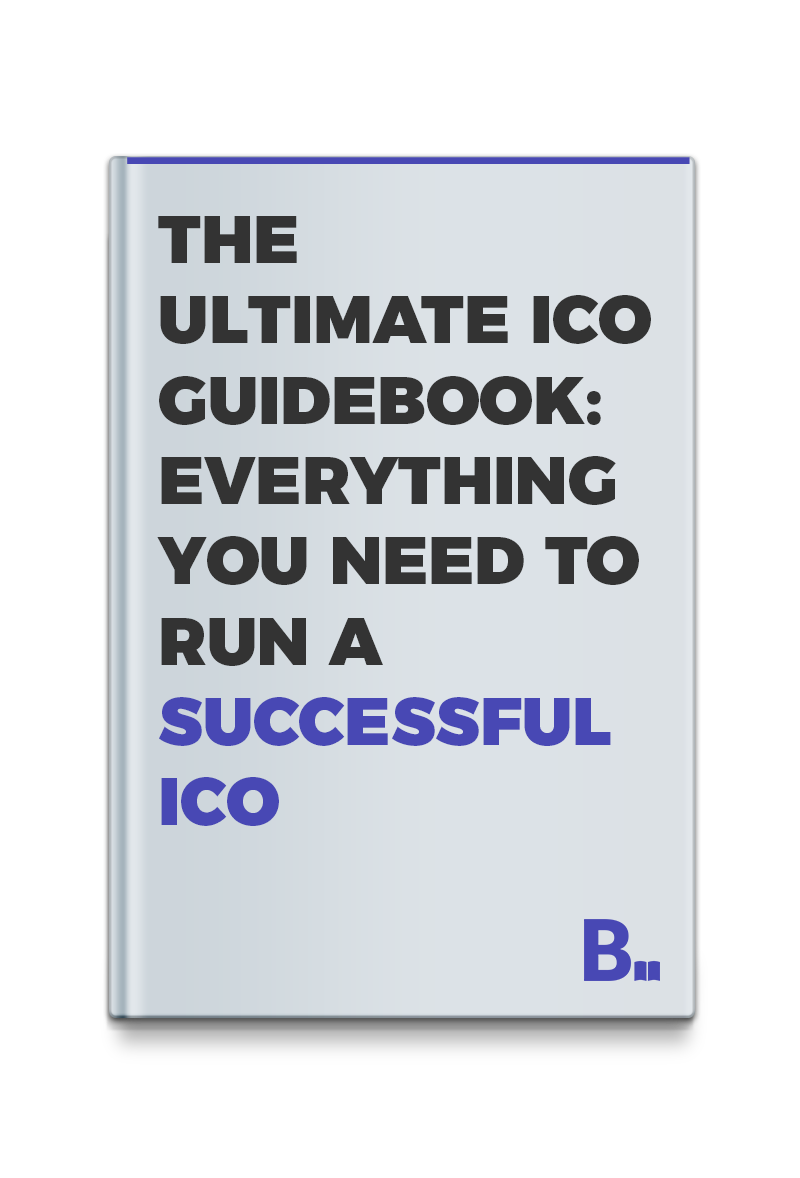
<style>
.page{position:relative;width:800px;height:1178px;background:#ffffff}
.page>*{position:absolute;margin:0}
.t1{font:66.9px "Montserrat-Black";color:#333333;text-transform:uppercase}
.t2{font:66.9px "Montserrat-Black";color:#333333}
.t3{font:66.9px "Montserrat-Black";color:#4848b4;text-transform:uppercase}
</style>
<div class="page">
<p class="t1" style="left:157px;top:216px;width:494px;height:610px"><span class="t2">THE ULTIMATE ICO GUIDEBOOK:<br></span>Everything you need TO RUN A<span class="t3"> successful ICO</span></p>
</div>
